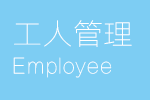
<style>
.page{position:relative;width:150px;height:100px;background:#7dcdf3}
.page>*{position:absolute;margin:0}
.t1{font:29.2px "FZLTCXHJW--GB1-0";letter-spacing:0.04em;color:#ffffff}
.t2{font:20.8px "FZLTCXHJW--GB1-0";letter-spacing:0.04em;color:#ffffff;scale:0.91 1}
</style>
<div class="page">
<p class="t1" style="left:14px;top:20px;width:118px;height:27px">工人管理</p>
<p class="t2" style="left:13px;top:57px;width:99px;height:21px">Employee</p>
</div>
